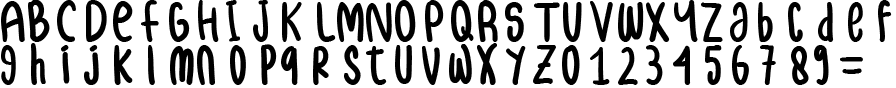
<style>
.page{position:relative;width:896px;height:88px;background:#ffffff}
.page>*{position:absolute;margin:0}
.t1{font:51.2px/42.7px "samble";color:#000000}
.t2{font:51.2px/42.7px "samble";letter-spacing:0.01em;color:#000000}
.t3{font:51.2px/42.7px "samble";letter-spacing:0.1em;color:#000000}
.t4{font:51.2px/42.7px "samble";letter-spacing:0.075em;color:#000000}
.t5{font:51.2px/42.7px "samble";letter-spacing:0.12em;color:#000000}
.t6{font:51.2px/42.7px "samble";letter-spacing:-0.01em;color:#000000}
.t7{font:51.2px/42.7px "samble";letter-spacing:0.15em;color:#000000}
.t8{font:51.2px/42.7px "samble";letter-spacing:0.05em;color:#000000}
.t9{font:51.2px/42.7px "samble";letter-spacing:0.025em;color:#000000}
</style>
<div class="page">
<p class="t1" style="left:1px;top:0px;width:891px;height:85px"><span class="t2">A</span><span class="t3">B</span>C <span class="t4">D</span><span class="t5">E</span>F G H I J K <span class="t6">L</span>MN<span class="t7">O</span>P <span class="t8">Q</span>R S TU <span class="t8">V</span>W<span class="t8">X</span><span class="t9">Y</span>Z a b c d e f<br>g h i j k l <span class="t2">m</span>n o <span class="t8">p</span>q r <span class="t8">s</span>t u v <span class="t8">w</span>x <span class="t3">y</span>z 0 1 2 3 4 5 6 7 8 9 =</p>
</div>
